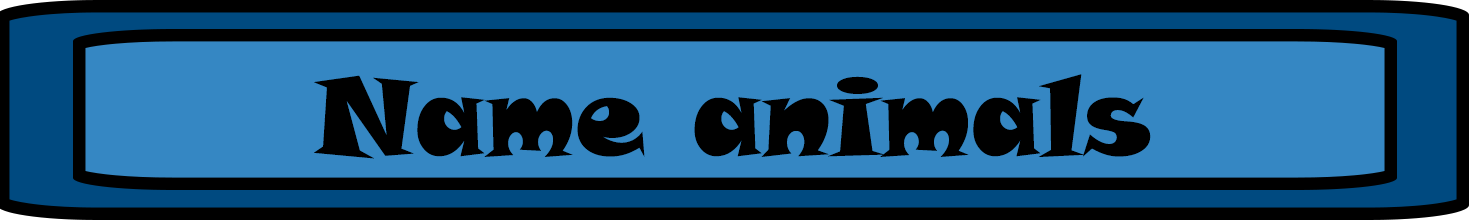
<style>
.page{position:relative;width:1472px;height:220px;background:#3587c3}
.page>*{position:absolute;margin:0}
.t1{font:110px "SnapITC-Regular";color:#000000}
</style>
<div class="page">
<p class="t1" style="left:314px;top:74px;width:837px;height:85px">Name animals</p>
</div>
